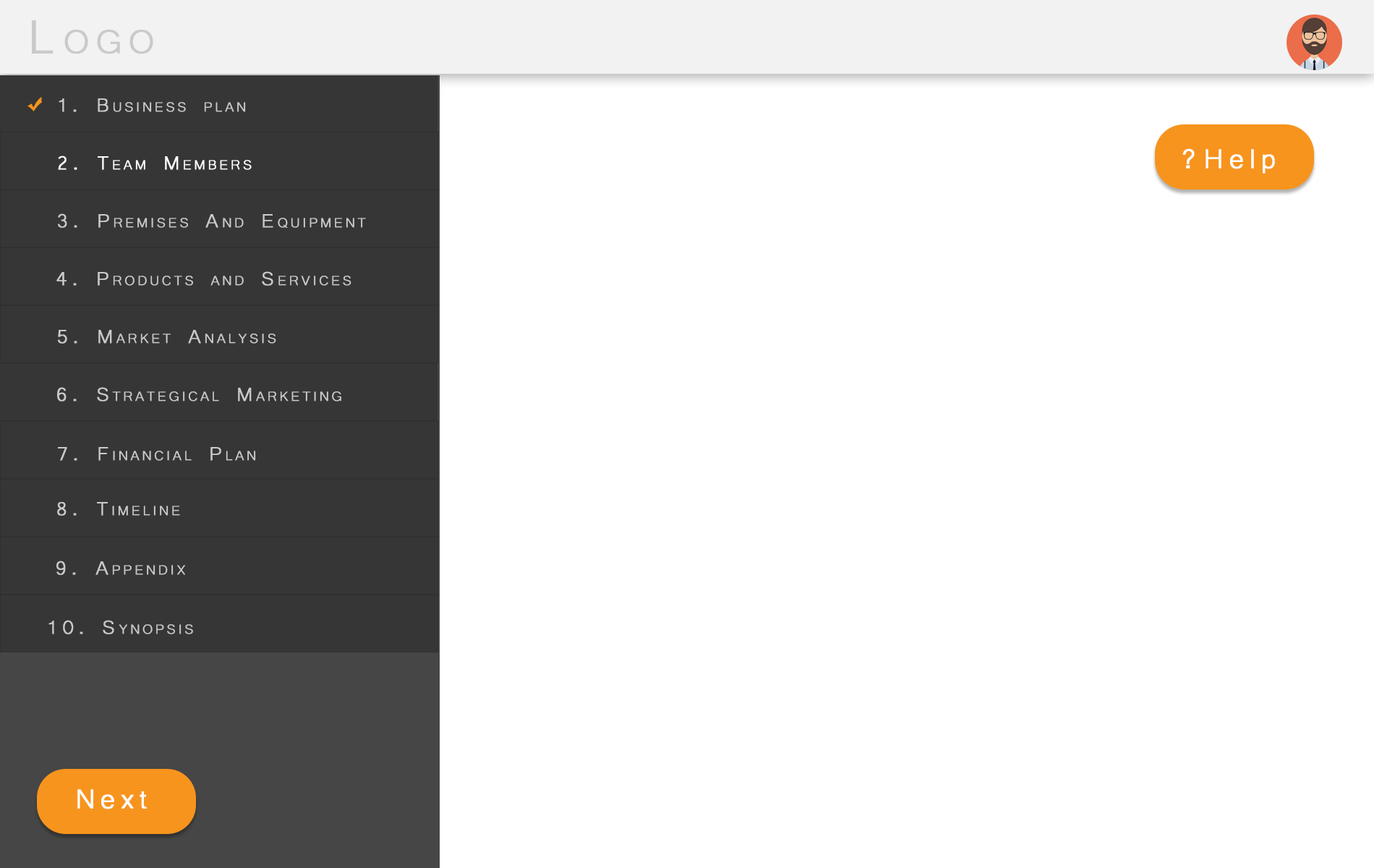
<style>
.page{position:relative;width:1374px;height:868px;background:#ffffff}
.page>*{position:absolute;margin:0}
.t1{font:60.7px "Microsoft-Yi-Baiti";letter-spacing:0.13em;color:#cbcaca;font-variant:small-caps;font-weight:bold}
.t2{font:24.3px "Microsoft-Yi-Baiti";letter-spacing:0.13em;color:#cbcaca;font-variant:small-caps;font-weight:bold}
.t3{font:34.7px "Microsoft-Yi-Baiti";letter-spacing:0.13em;color:#fefefe;font-weight:bold}
.t4{font:24.3px "Microsoft-Yi-Baiti";letter-spacing:0.13em;color:#ffffff;font-variant:small-caps;font-weight:bold}
.t5{font:24.3px/86.8px "Microsoft-Yi-Baiti";letter-spacing:0.13em;color:#cbcaca;font-variant:small-caps;font-weight:bold}
</style>
<div class="page">
<p class="t1" style="left:32px;top:20px;width:121px;height:34px">Logo</p>
<p class="t2" style="left:59px;top:98px;width:187px;height:14px">1. Business plan</p>
<p class="t3" style="left:1182px;top:148px;width:93px;height:26px">?Help</p>
<p class="t4" style="left:58px;top:155px;width:194px;height:15px">2. Team Members</p>
<p class="t5" style="left:58px;top:213px;width:308px;height:16px">3. Premises And Equipment<br><br>Equipment</p>
<p class="t2" style="left:56px;top:271px;width:295px;height:15px">4. Products and Services</p>
<p class="t2" style="left:58px;top:330px;width:218px;height:14px">5. Market Analysis</p>
<p class="t2" style="left:57px;top:387px;width:284px;height:14px">6. Strategical Marketing</p>
<p class="t2" style="left:58px;top:447px;width:198px;height:14px">7. Financial Plan</p>
<p class="t2" style="left:57px;top:502px;width:123px;height:14px">8. Timeline</p>
<p class="t2" style="left:56px;top:560px;width:129px;height:15px">9. Appendix</p>
<p class="t2" style="left:48px;top:620px;width:145px;height:14px">10. Synopsis</p>
<p class="t3" style="left:77px;top:789px;width:70px;height:20px">Next</p>
</div>
